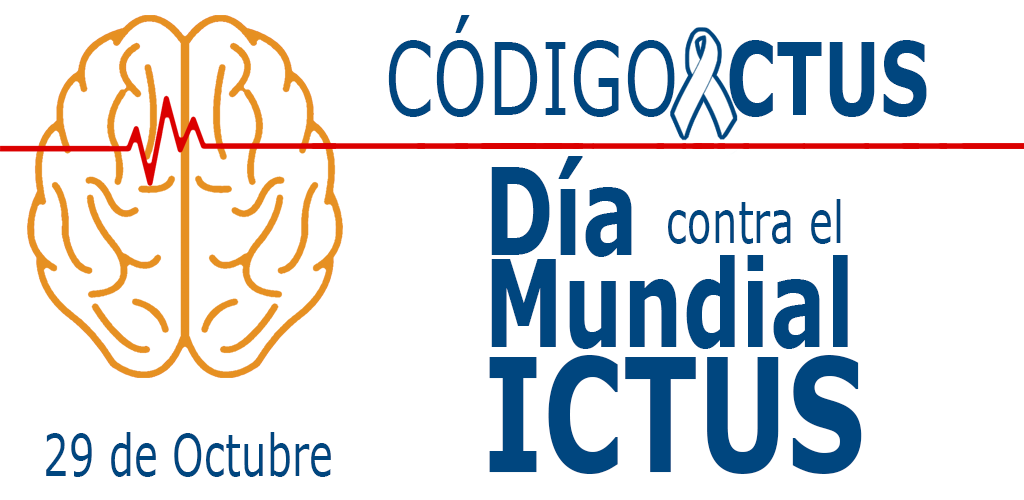
<style>
.page{position:relative;width:1024px;height:500px;background:#ffffff}
.page>*{position:absolute;margin:0}
.t1{font:100px "Verdana";color:#00467f;scale:0.69 1}
.t2{font:100px "Verdana-Bold";color:#00467f;scale:0.69 1}
.t3{font:120.8px/91.7px "Verdana-Bold";color:#00467f;scale:0.69 1}
.t4{font:120.8px/55.6px "Verdana-Bold";color:#00467f;scale:0.69 1}
.t5{font:58.3px "Verdana";color:#00467f;scale:0.69 1}
.t6{font:158.3px "Verdana-Bold";color:#00467f;scale:0.69 1}
</style>
<div class="page">
<p class="t1" style="left:388px;top:15px;width:539px;height:102px">CÓDIGO<span class="t2">  CTUS</span></p>
<p class="t3" style="left:491px;top:156px;width:357px;height:193px"><span class="t4">Día<br></span>Mundial</p>
<p class="t5" style="left:668px;top:199px;width:173px;height:45px">contra el</p>
<p class="t6" style="left:489px;top:355px;width:373px;height:119px">ICTUS</p>
<p class="t5" style="left:46px;top:432px;width:285px;height:45px">29 de Octubre</p>
</div>
